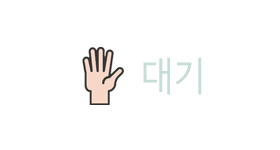
<style>
.page{position:relative;width:280px;height:150px;background:#ffffff}
.page>*{position:absolute;margin:0}
.t1{font:40px "SeN-CM";color:#c6dfd6}
</style>
<div class="page">
<p class="t1" style="left:143px;top:57px;width:59px;height:38px">대기</p>
</div>
